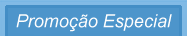
<style>
.page{position:relative;width:187px;height:36px;background:#4d95cb}
.page>*{position:absolute;margin:0}
.t1{font:18px "Arial-ItalicMT";color:#fffefd}
</style>
<div class="page">
<p class="t1" style="left:16px;top:14px;width:156px;height:18px">Promoção Especial</p>
</div>
